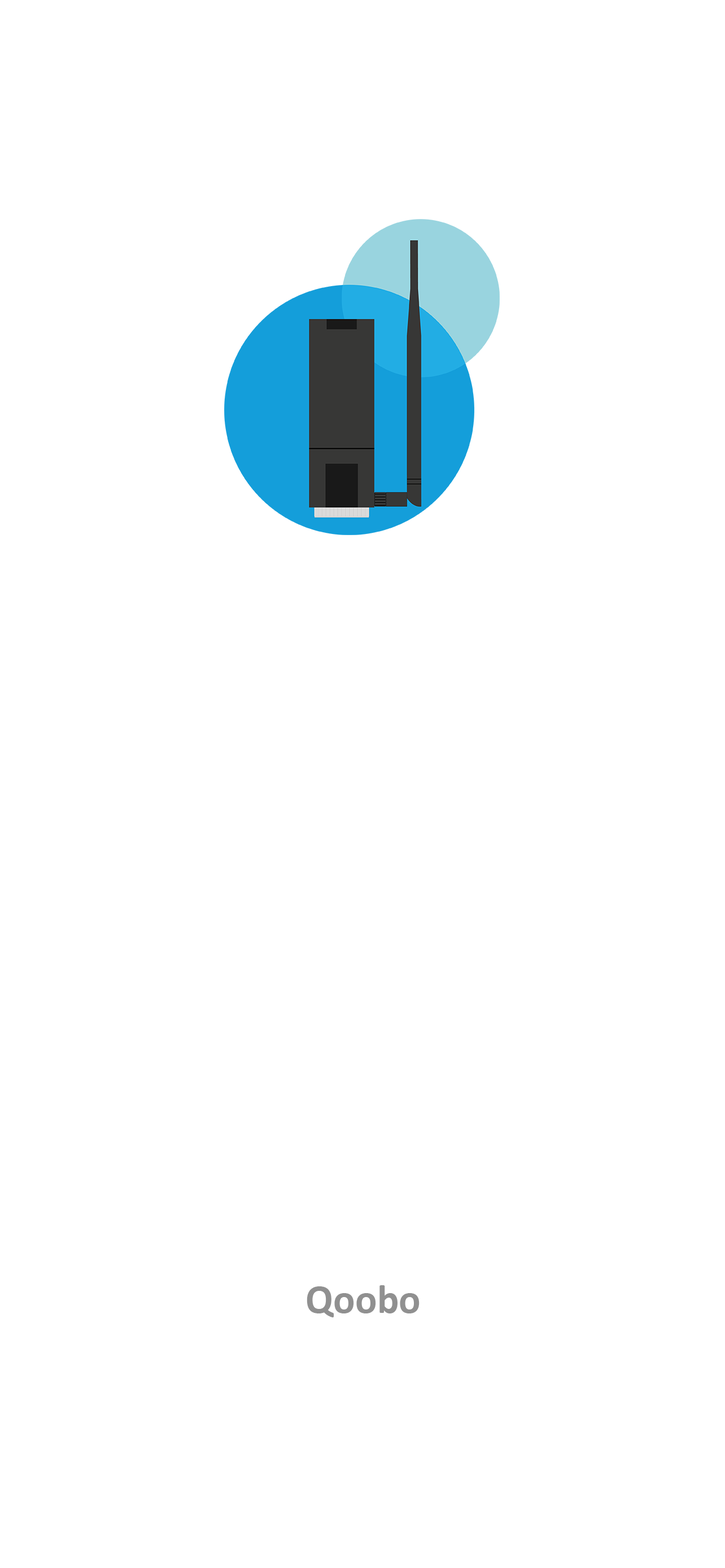
<style>
.page{position:relative;width:725px;height:1568px;background:#ffffff}
.page>*{position:absolute;margin:0}
.t1{font:40.6px "Calibri-Bold";color:#909090}
</style>
<div class="page">
<p class="t1" style="left:306px;top:1285px;width:113px;height:32px">Qoobo</p>
</div>
